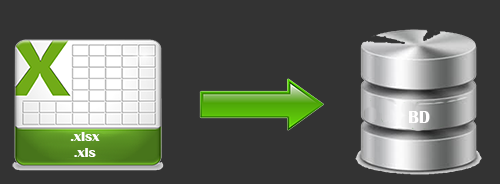
<style>
.page{position:relative;width:500px;height:184px;background:#333333}
.page>*{position:absolute;margin:0}
.t1{font:17.5px "BritannicBold";color:#fffefe}
.t2{font:13.8px "BritannicBold";color:#fffefe;scale:1.06 1}
</style>
<div class="page">
<p class="t1" style="left:409px;top:111px;width:21px;height:12px">BD</p>
<p class="t2" style="left:70px;top:132px;width:30px;height:25px;text-align:center">.xlsx<br>.xls</p>
</div>
